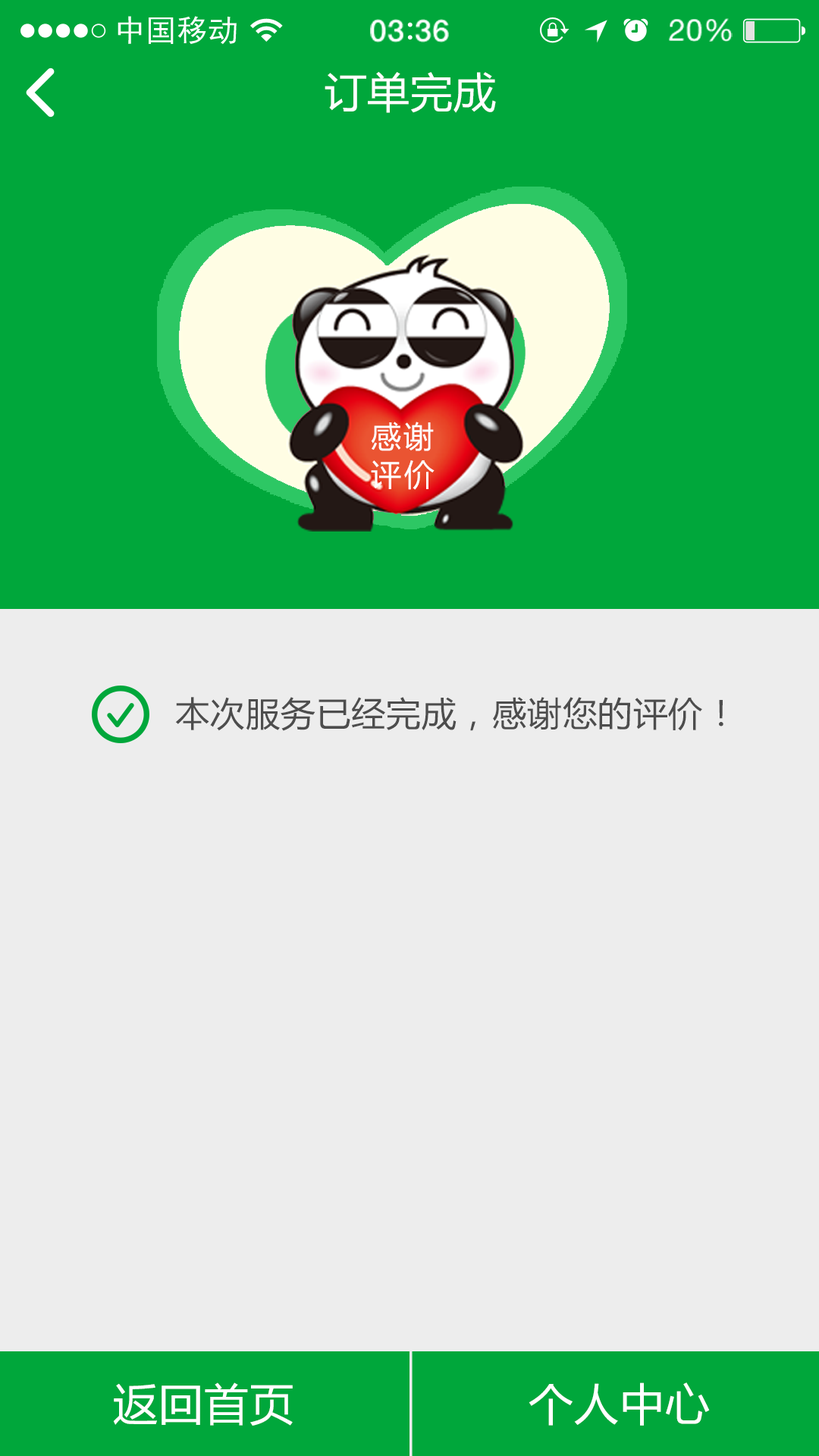
<style>
.page{position:relative;width:819px;height:1456px;background:#ededed}
.page>*{position:absolute;margin:0}
.t1{font:41.7px "MicrosoftYaHei";letter-spacing:0.02em;color:#ffffff}
.t2{font:30.3px/37.9px "MicrosoftYaHei";letter-spacing:0.1em;color:#ffffff}
.t3{font:34.1px "MicrosoftYaHei";letter-spacing:0.02em;color:#4d4d4d}
.t4{font:44px "MicrosoftYaHei";letter-spacing:0.02em;color:#ffffff}
</style>
<div class="page">
<p class="t1" style="left:325px;top:71px;width:171px;height:42px">订单完成</p>
<p class="t2" style="left:371px;top:422px;width:64px;height:68px">感谢<br>评价</p>
<p class="t3" style="left:175px;top:697px;width:548px;height:34px">本次服务已经完成，感谢您的评价！</p>
<p class="t4" style="left:113px;top:1382px;width:180px;height:44px">返回首页</p>
<p class="t4" style="left:529px;top:1382px;width:181px;height:44px">个人中心</p>
</div>
